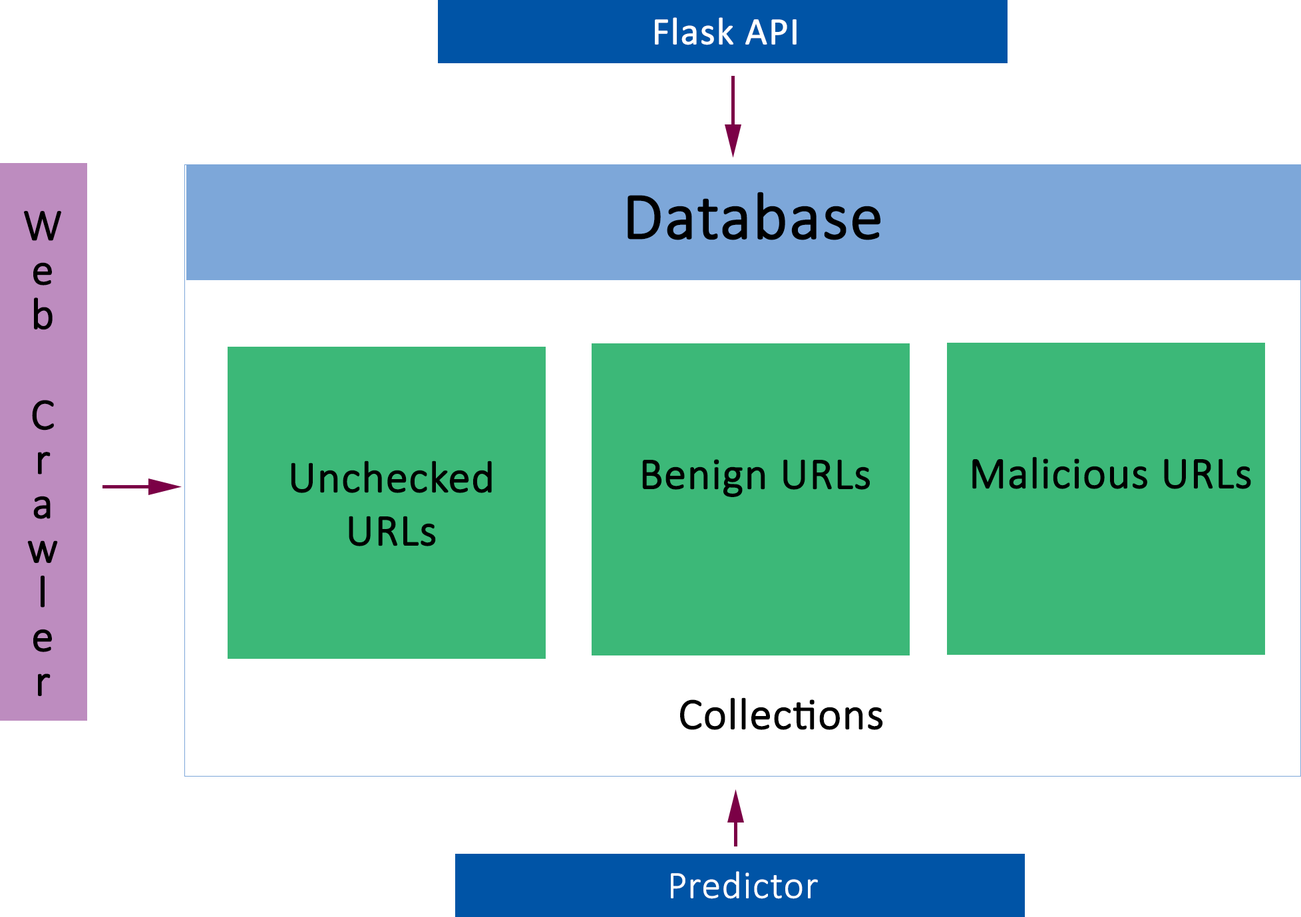
<style>
.page{position:relative;width:1301px;height:917px;background:#ffffff}
.page>*{position:absolute;margin:0}
.t1{font:38.8px "Calibri";color:#ffffff;font-weight:bold}
.t2{font:66.5px "Calibri-Light";color:#000000;font-weight:bold}
.t3{font:44.4px "Calibri-Light";color:#000000;font-weight:bold}
.t4{font:38.8px "Calibri-Light";color:#ffffff;font-weight:bold}
</style>
<div class="page">
<p class="t1" style="left:655px;top:17px;width:141px;height:28px">Flask API</p>
<p class="t2" style="left:627px;top:192px;width:253px;height:48px">Database</p>
<p class="t3" style="left:24px;top:211px;width:37px;height:485px">Web     Crawler</p>
<p class="t3" style="left:291px;top:460px;width:201px;height:86px;text-align:center">Unchecked<br>URLs</p>
<p class="t3" style="left:642px;top:459px;width:228px;height:38px">Benign URLs</p>
<p class="t3" style="left:972px;top:456px;width:279px;height:33px">Malicious URLs</p>
<p class="t3" style="left:680px;top:697px;width:203px;height:33px">Collections</p>
<p class="t4" style="left:671px;top:871px;width:147px;height:28px">Predictor</p>
</div>
